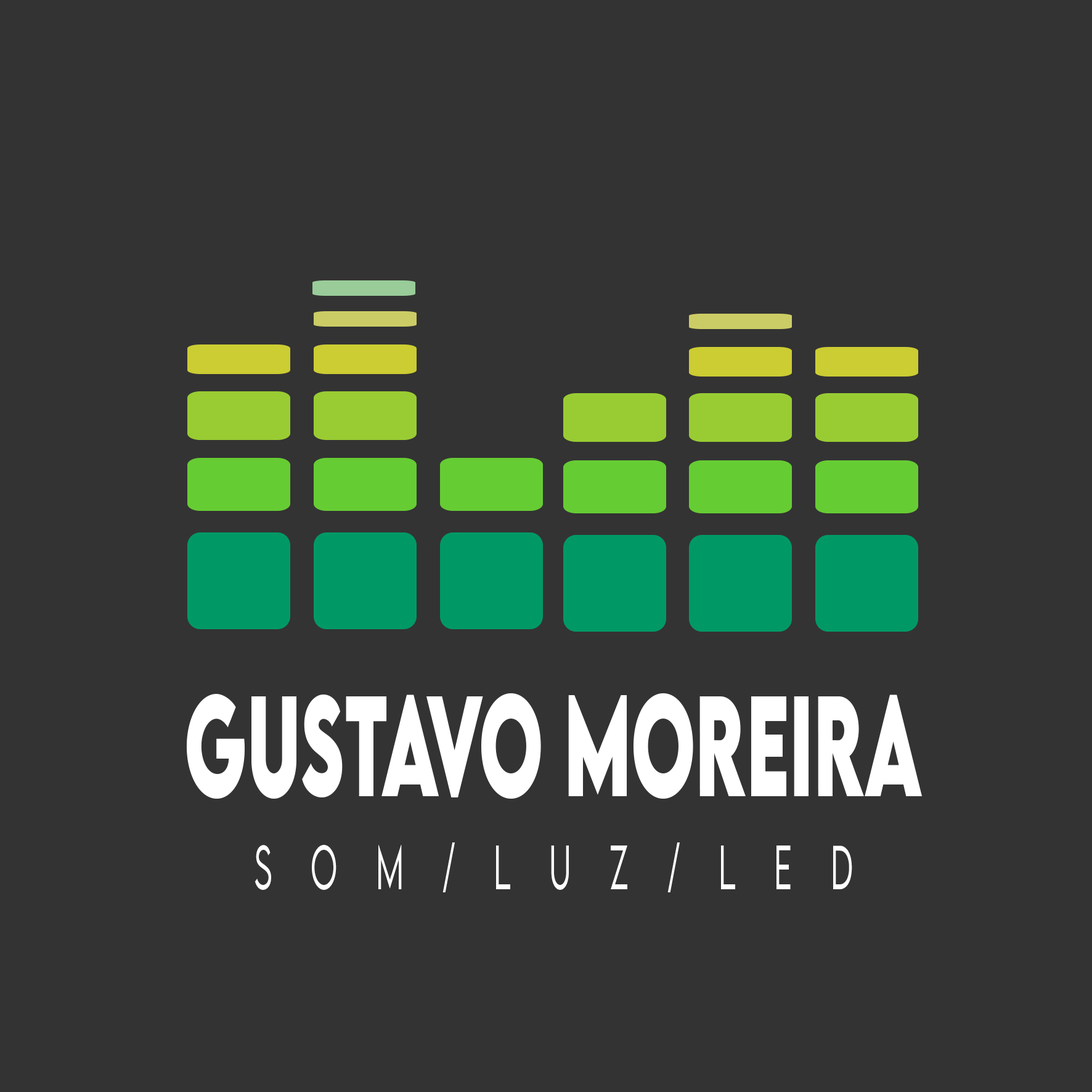
<style>
.page{position:relative;width:1092px;height:1092px;background:#333333}
.page>*{position:absolute;margin:0}
.t1{font:127.2px "LEMONMILK-Bold";color:#ffffff;scale:0.54 1}
.t2{font:55.2px "LEMONMILK-Light";letter-spacing:1.28em;color:#ffffff;scale:0.54 1}
</style>
<div class="page">
<p class="t1" style="left:187px;top:693px;width:735px;height:106px">GUSTAVO MOREIRA</p>
<p class="t1" style="left:187px;top:693px;width:735px;height:106px">GUSTAVO MOREIRA</p>
<p class="t2" style="left:255px;top:842px;width:597px;height:50px">som/luz/led</p>
<p class="t2" style="left:255px;top:842px;width:597px;height:50px">som/luz/led</p>
</div>
